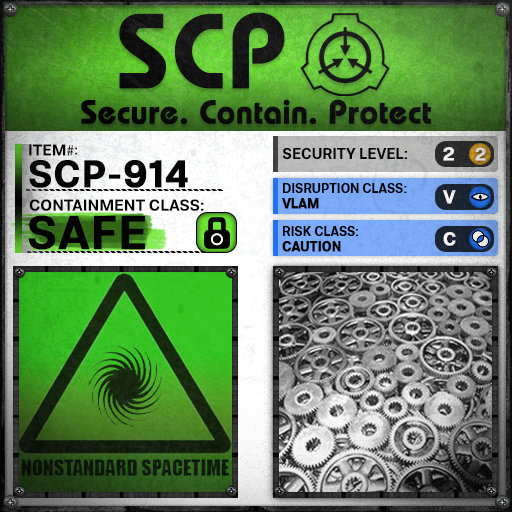
<style>
.page{position:relative;width:512px;height:512px}
.page>*{position:absolute;margin:0}
.t1{font:105.8px "BauhausLT-Demi";color:#000000;font-weight:bold}
.t2{font:33px "BauhausLT-Demi";color:#000000;font-weight:bold}
.t3{font:15.7px "Molde-Semibold";color:#000000}
.t4{font:15.7px "MyriadPro-Regular";color:#000000}
.t5{font:13.7px "Molde-Semibold";color:#000000}
.t6{font:15px "Molde-Semibold";color:#000000}
.t7{font:18.6px "Molde-Semibold";color:#ffffff;font-weight:bold}
.t8{font:17.8px "Molde-Semibold";color:#d7d8d7;font-weight:bold}
.t9{font:38.2px "Molde-Semibold";color:#000000;font-weight:bold}
.t10{font:12.8px "Molde-Semibold";color:#000000}
.t11{font:12.8px "Molde-Semibold";color:#000000;font-weight:bold}
.t12{font:15.9px "Molde-Semibold";color:#000000}
.t13{font:47.2px "Molde-Semibold";color:#000000;font-weight:bold}
</style>
<div class="page">
<p class="t1" style="left:119px;top:12px;width:166px;height:77px">SCP</p>
<p class="t2" style="left:81px;top:99px;width:350px;height:26px">Secure. Contain. Protect</p>
<p class="t3" style="left:29px;top:144px;width:45px;height:12px">ITEM<span class="t4">#</span></p>
<p class="t5" style="left:75px;top:147px;width:2px;height:8px">:</p>
<p class="t6" style="left:283px;top:148px;width:124px;height:11px">SECURITY LEVEL:</p>
<p class="t7" style="left:443px;top:147px;width:11px;height:14px">2</p>
<p class="t8" style="left:475px;top:147px;width:11px;height:14px">2</p>
<p class="t9" style="left:29px;top:160px;width:159px;height:28px">SCP-914</p>
<p class="t10" style="left:282px;top:183px;width:125px;height:26px">DISRUPTION CLASS:<br><span class="t11">VLAM</span></p>
<p class="t7" style="left:443px;top:190px;width:13px;height:14px">V</p>
<p class="t12" style="left:29px;top:199px;width:175px;height:12px">CONTAINMENT CLASS:</p>
<p class="t13" style="left:28px;top:215px;width:118px;height:35px">SAFE</p>
<p class="t10" style="left:282px;top:226px;width:76px;height:26px">RISK CLASS:<br><span class="t11">CAUTION</span></p>
<p class="t7" style="left:443px;top:232px;width:13px;height:14px">C</p>
</div>
